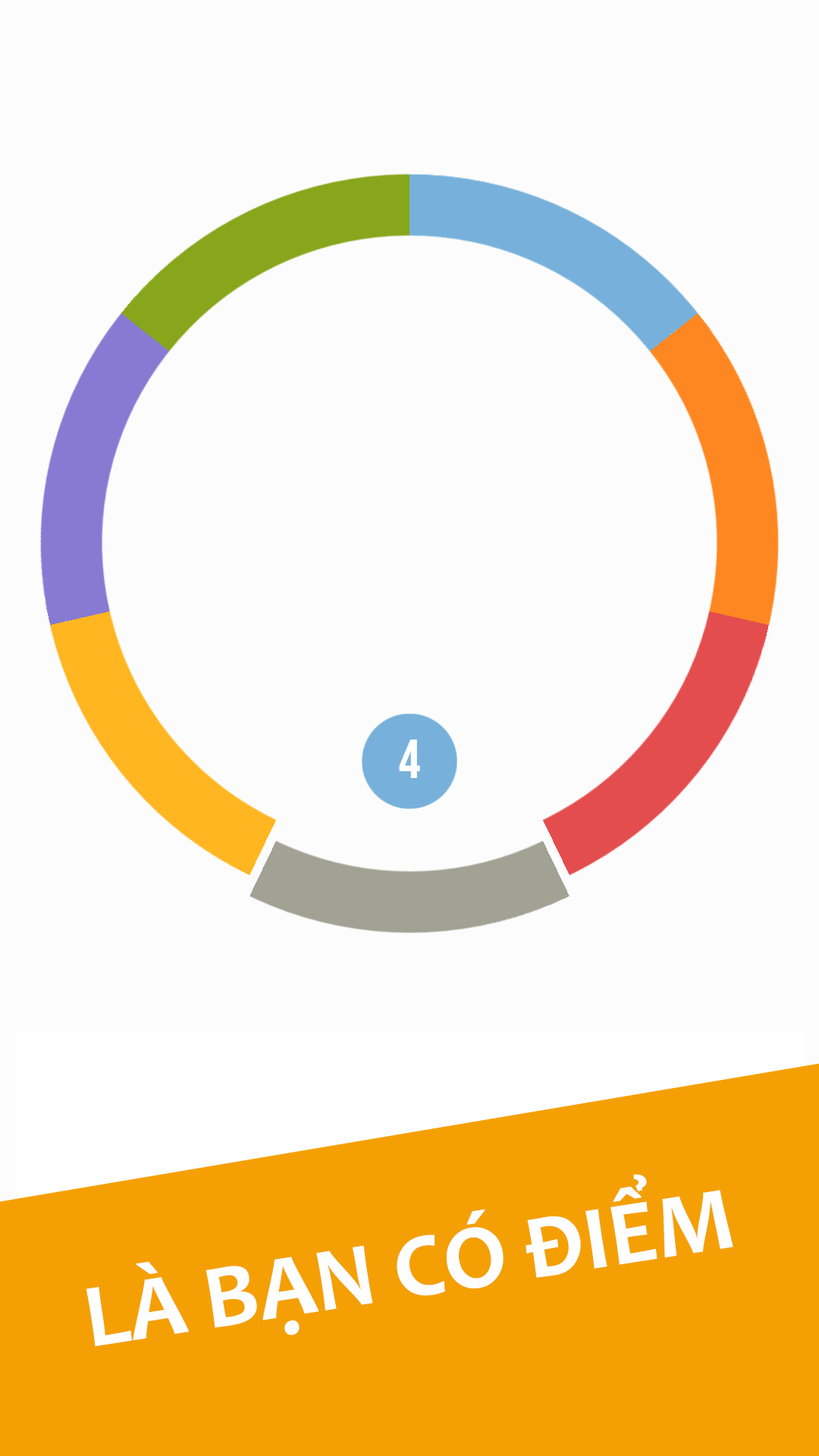
<style>
.page{position:relative;width:819px;height:1456px;background:#fcfcfc}
.page>*{position:absolute;margin:0}
.t1{font:91px "Candara-Bold";color:#fefefe}
</style>
<div class="page">
<p class="t1" style="left:86px;top:1174px;width:647px;height:173px;rotate:-9deg">LÀ BẠN CÓ ĐIỂM</p>
</div>
